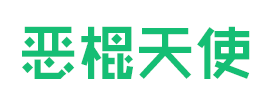
<style>
.page{position:relative;width:263px;height:105px;background:#ffffff}
.page>*{position:absolute;margin:0}
.t1{font:58.3px "MFShangHei_Noncommercial-Bold";color:#15be74}
</style>
<div class="page">
<p class="t1" style="left:22px;top:26px;width:228px;height:53px">恶棍天使</p>
</div>
